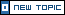
<style>
.page{position:relative;width:65px;height:15px;background:#ffffff}
.page>*{position:absolute;margin:0}
.t1{font:8px "BitDustTwo";color:#144c7d;text-transform:uppercase}
</style>
<div class="page">
<p class="t1" style="left:14px;top:5px;width:47px;height:5px">new topic</p>
</div>
